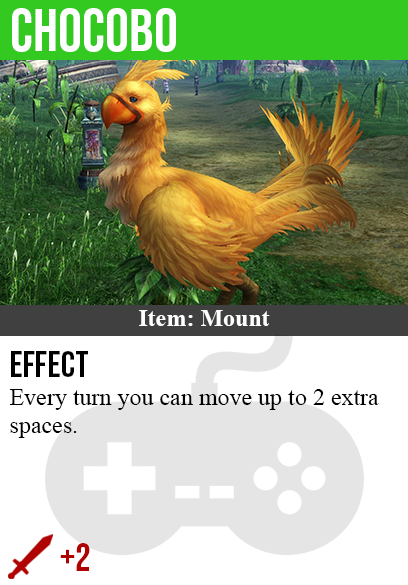
<style>
.page{position:relative;width:408px;height:585px;background:#ffffff}
.page>*{position:absolute;margin:0}
.t1{font:60px "BebasNeue-Regular";color:#ffffff}
.t2{font:24px "TimesNewRomanPS-BoldMT";color:#ffffff}
.t3{font:36px "BebasNeue-Regular";color:#000000}
.t4{font:24px "TimesNewRomanPSMT";color:#000000}
.t5{font:40px "BebasNeue-Regular";color:#af0202}
</style>
<div class="page">
<p class="t1" style="left:12px;top:8px;width:164px;height:44px">chocobo</p>
<p class="t2" style="left:139px;top:310px;width:131px;height:16px">Item: Mount</p>
<p class="t3" style="left:11px;top:351px;width:77px;height:26px">effect</p>
<p class="t4" style="left:9px;top:389px;width:370px;height:49px">Every turn you can move up to 2 extra<br>spaces.</p>
<p class="t5" style="left:60px;top:543px;width:30px;height:28px">+2</p>
</div>
